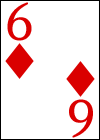
<style>
.page{position:relative;width:100px;height:140px;background:#ffffff}
.page>*{position:absolute;margin:0}
.t1{font:60px "HighTowerText-Reg";color:#da0000}
</style>
<div class="page">
<p class="t1" style="left:7px;top:2px;width:25px;height:39px">6</p>
<p class="t1" style="left:69px;top:99px;width:24px;height:39px;rotate:180deg">6</p>
</div>
